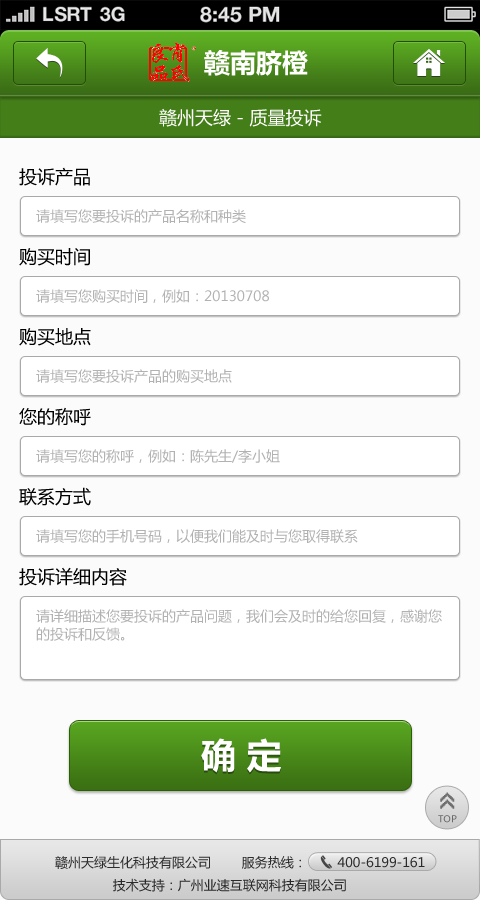
<style>
.page{position:relative;width:480px;height:900px;background:#fbfbfb}
.page>*{position:absolute;margin:0}
.t1{font:26px "MicrosoftYaHeiBold";color:#ffffff}
.t2{font:18px "MicrosoftYaHei";color:#ffffff}
.t3{font:18px "MicrosoftYaHei";color:#000000}
.t4{font:14px "MicrosoftYaHei";color:#b2b2b2}
.t5{font:14px/18px "MicrosoftYaHei";color:#b2b2b2}
.t6{font:35px "MicrosoftYaHeiBold";color:#ffffff}
.t7{font:26px "8514oem";letter-spacing:-0.2em;color:#6f6f6f;font-weight:bold}
.t8{font:9.3px "MicrosoftYaHei";color:#686868}
.t9{font:13px "MicrosoftYaHei";color:#2c2c2c}
</style>
<div class="page">
<p class="t1" style="left:204px;top:50px;width:104px;height:26px">赣南脐橙</p>
<p class="t2" style="left:159px;top:108px;width:163px;height:19px">赣州天绿 - 质量投诉</p>
<p class="t3" style="left:19px;top:167px;width:71px;height:19px">投诉产品</p>
<p class="t4" style="left:36px;top:209px;width:210px;height:14px">请填写您要投诉的产品名称和种类</p>
<p class="t3" style="left:19px;top:248px;width:71px;height:18px">购买时间</p>
<p class="t4" style="left:36px;top:289px;width:233px;height:14px">请填写您购买时间，例如：20130708</p>
<p class="t3" style="left:19px;top:328px;width:72px;height:18px">购买地点</p>
<p class="t4" style="left:36px;top:369px;width:196px;height:14px">请填写您要投诉产品的购买地点</p>
<p class="t3" style="left:19px;top:407px;width:72px;height:19px">您的称呼</p>
<p class="t4" style="left:36px;top:449px;width:244px;height:14px">请填写您的称呼，例如：陈先生/李小姐</p>
<p class="t3" style="left:19px;top:487px;width:72px;height:19px">联系方式</p>
<p class="t4" style="left:36px;top:529px;width:322px;height:14px">请填写您的手机号码，以便我们能及时与您取得联系</p>
<p class="t3" style="left:19px;top:567px;width:108px;height:19px">投诉详细内容</p>
<p class="t5" style="left:36px;top:609px;width:406px;height:32px">请详细描述您要投诉的产品问题，我们会及时的给您回复，感谢您<br>的投诉和反馈。</p>
<p class="t6" style="left:201px;top:738px;width:80px;height:35px">确 定</p>
<p class="t7" style="left:440px;top:792px;width:15px;height:17px;rotate:-90deg">&gt;&gt;</p>
<p class="t8" style="left:438px;top:815px;width:19px;height:8px">TOP</p>
<p class="t9" style="left:55px;top:856px;width:370px;height:36px">赣州天绿生化科技有限公司        服务热线：        400-6199-161<br>               技术支持：广州业速互联网科技有限公司</p>
</div>
